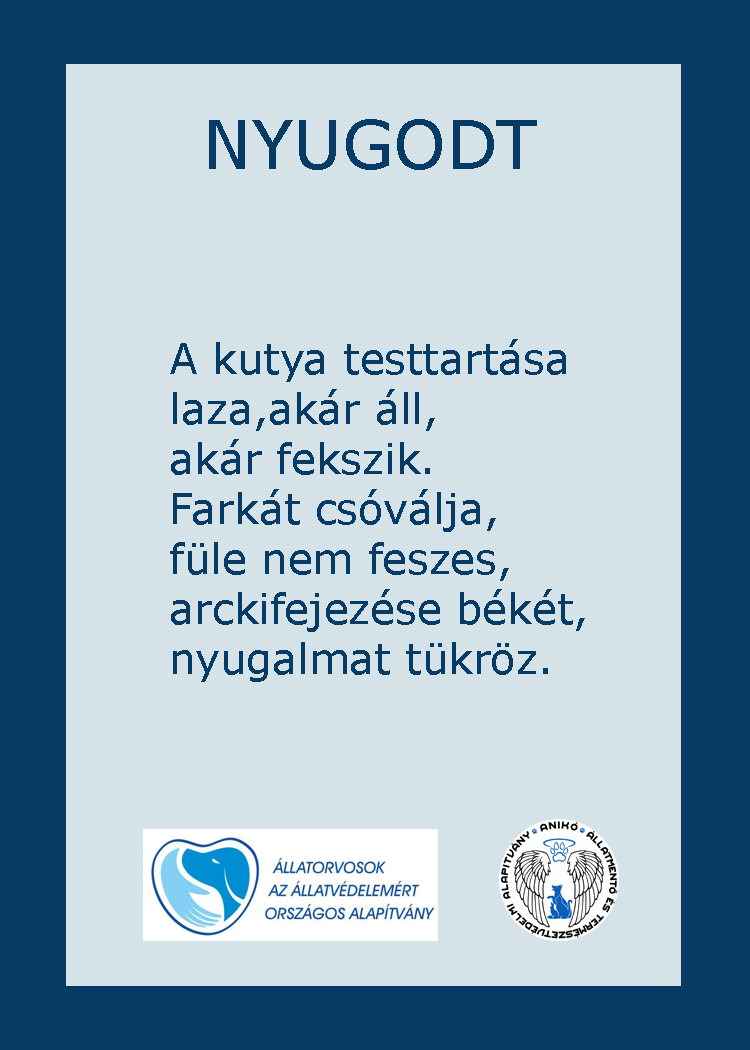
<style>
.page{position:relative;width:750px;height:1050px;background:#d5e2e7}
.page>*{position:absolute;margin:0}
.t1{font:66.7px "Verdana";color:#053b65}
.t2{font:66.7px "GravitateBRK";color:#053b65}
.t3{font:41.7px "Verdana";color:#053b65}
</style>
<div class="page">
<p class="t1" style="left:209px;top:119px;width:328px;height:51px"><span class="t2">         </span>NYUGODT</p>
<p class="t3" style="left:170px;top:339px;width:415px;height:343px">A kutya testtartása<br>laza,akár áll,<br>akár fekszik.<br>Farkát csóválja,<br>füle nem feszes,<br>arckifejezése békét,<br>nyugalmat tükröz.</p>
</div>
